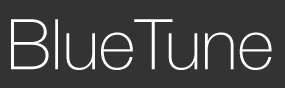
<style>
.page{position:relative;width:285px;height:88px;background:#333333}
.page>*{position:absolute;margin:0}
.t1{font:70px "HelveticaNeue-Thin";color:#ffffff}
</style>
<div class="page">
<p class="t1" style="left:11px;top:19px;width:261px;height:51px">BlueTune</p>
</div>
